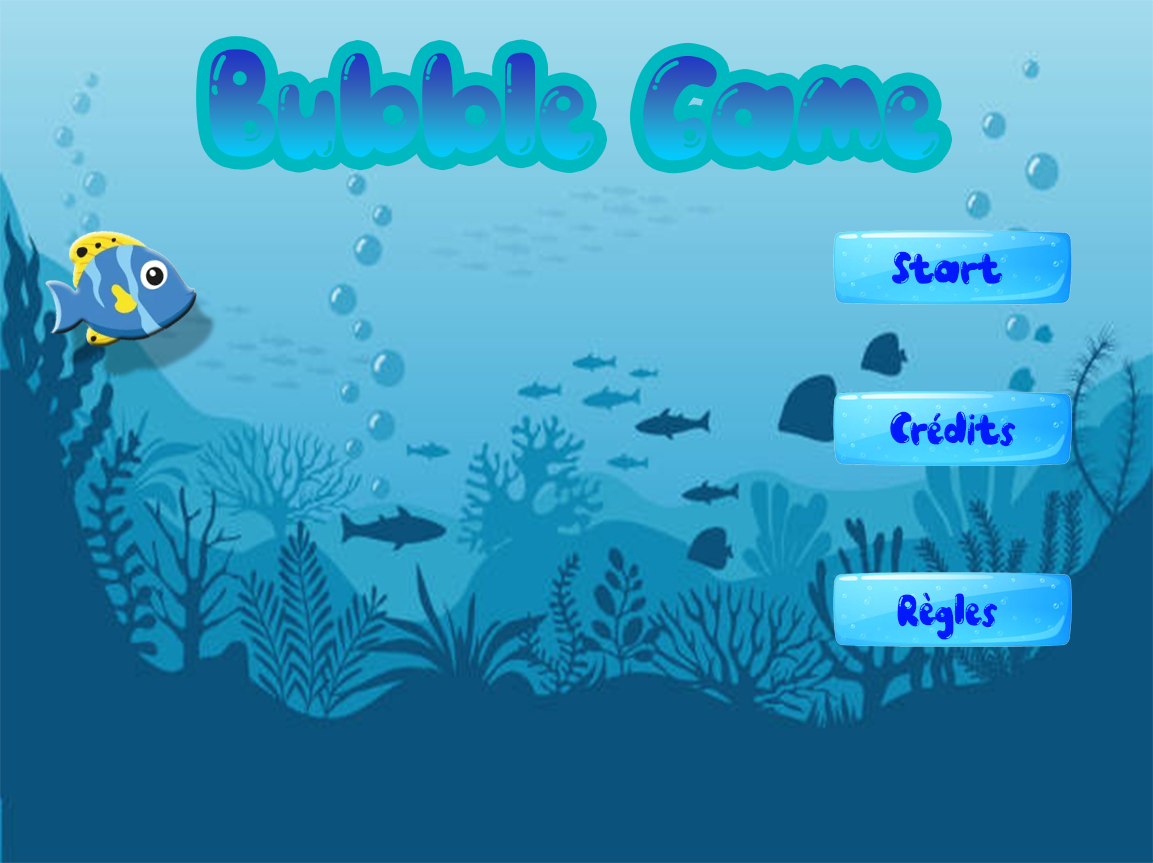
<style>
.page{position:relative;width:1153px;height:863px;background:#0b527c}
.page>*{position:absolute;margin:0}
.t1{font:152.4px "JustBubbleRegular"}
.t2{font:45.7px "JustBubbleRegular";color:#001afb}
</style>
<div class="page">
<p class="t1" style="left:209px;top:49px;width:730px;height:112px">Bubble Game</p>
<p class="t2" style="left:892px;top:251px;width:111px;height:34px">Start</p>
<p class="t2" style="left:890px;top:411px;width:126px;height:36px">Crédits</p>
<p class="t2" style="left:897px;top:592px;width:101px;height:48px">Règles</p>
</div>
